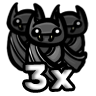
<style>
.page{position:relative;width:96px;height:96px;background:#ffffff}
.page>*{position:absolute;margin:0}
.t1{font:36px "Rubik-Bold";letter-spacing:0.072em}
</style>
<div class="page">
<p class="t1" style="left:25px;top:64px;width:48px;height:26px;rotate:-2deg">3x</p>
</div>
